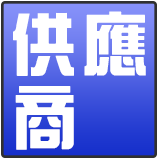
<style>
.page{position:relative;width:160px;height:160px;background:#ffffff}
.page>*{position:absolute;margin:0}
.t1{font:70.6px "DFZongYi-XB";letter-spacing:0.08em;color:#ffffff;scale:0.93 1}
</style>
<div class="page">
<p class="t1" style="left:13px;top:11px;width:133px;height:65px">供應</p>
<p class="t1" style="left:15px;top:86px;width:59px;height:64px">商</p>
</div>
